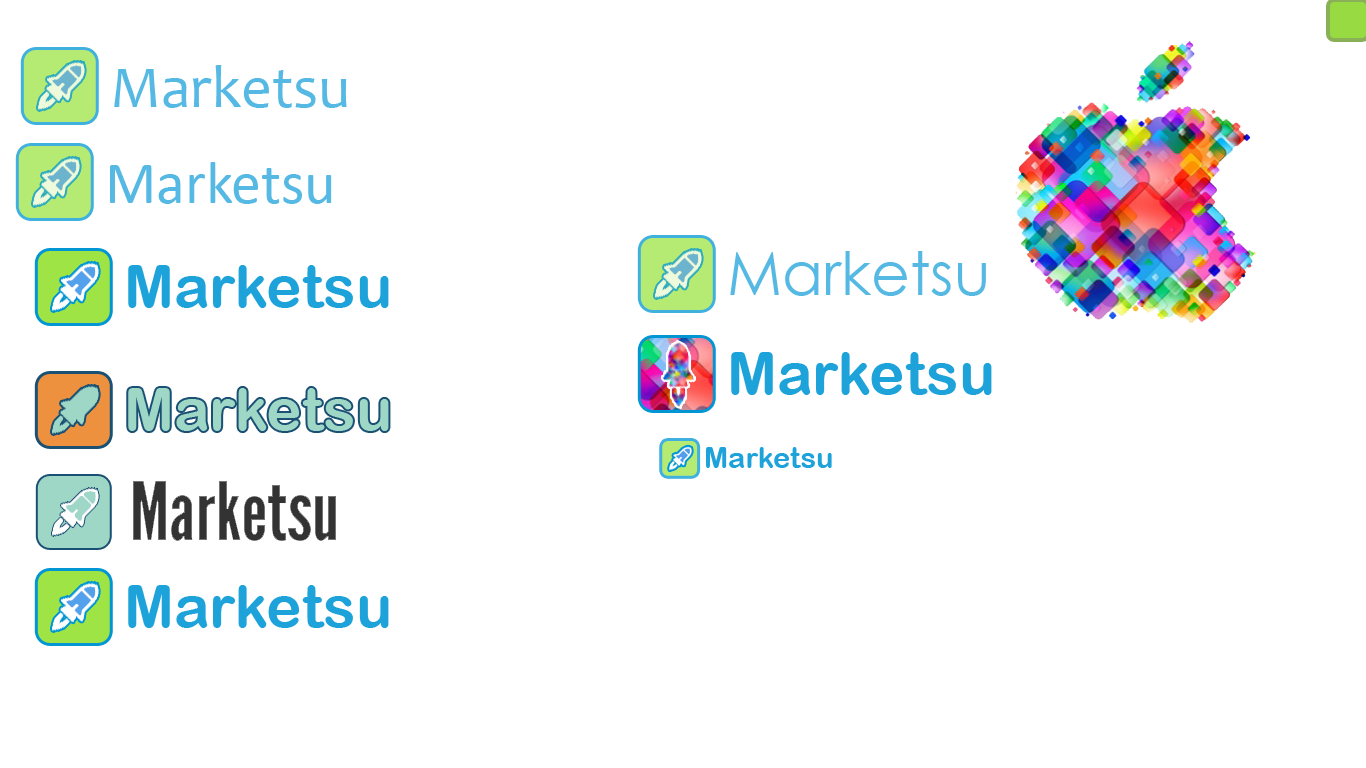
<style>
.page{position:relative;width:1366px;height:768px;background:#ffffff}
.page>*{position:absolute;margin:0}
.t1{font:60px "Candara";color:#56b9e3}
.t2{font:60px "Calibri";color:#56b9e3}
.t3{font:60px "CenturyGothic";color:#56b9e3}
.t4{font:60px "ArialRoundedMTBold";color:#1da2d9}
.t5{font:29.1px "ArialRoundedMTBold";color:#1da2d9}
</style>
<div class="page">
<p class="t1" style="left:114px;top:65px;width:233px;height:43px">Marketsu</p>
<p class="t2" style="left:110px;top:162px;width:222px;height:42px">Marketsu</p>
<p class="t3" style="left:730px;top:251px;width:256px;height:45px">Marketsu</p>
<p class="t4" style="left:128px;top:265px;width:261px;height:43px">Marketsu</p>
<p class="t4" style="left:731px;top:352px;width:261px;height:43px">Marketsu</p>
<p class="t5" style="left:706px;top:447px;width:126px;height:21px">Marketsu</p>
<p class="t4" style="left:128px;top:585px;width:261px;height:43px">Marketsu</p>
</div>
